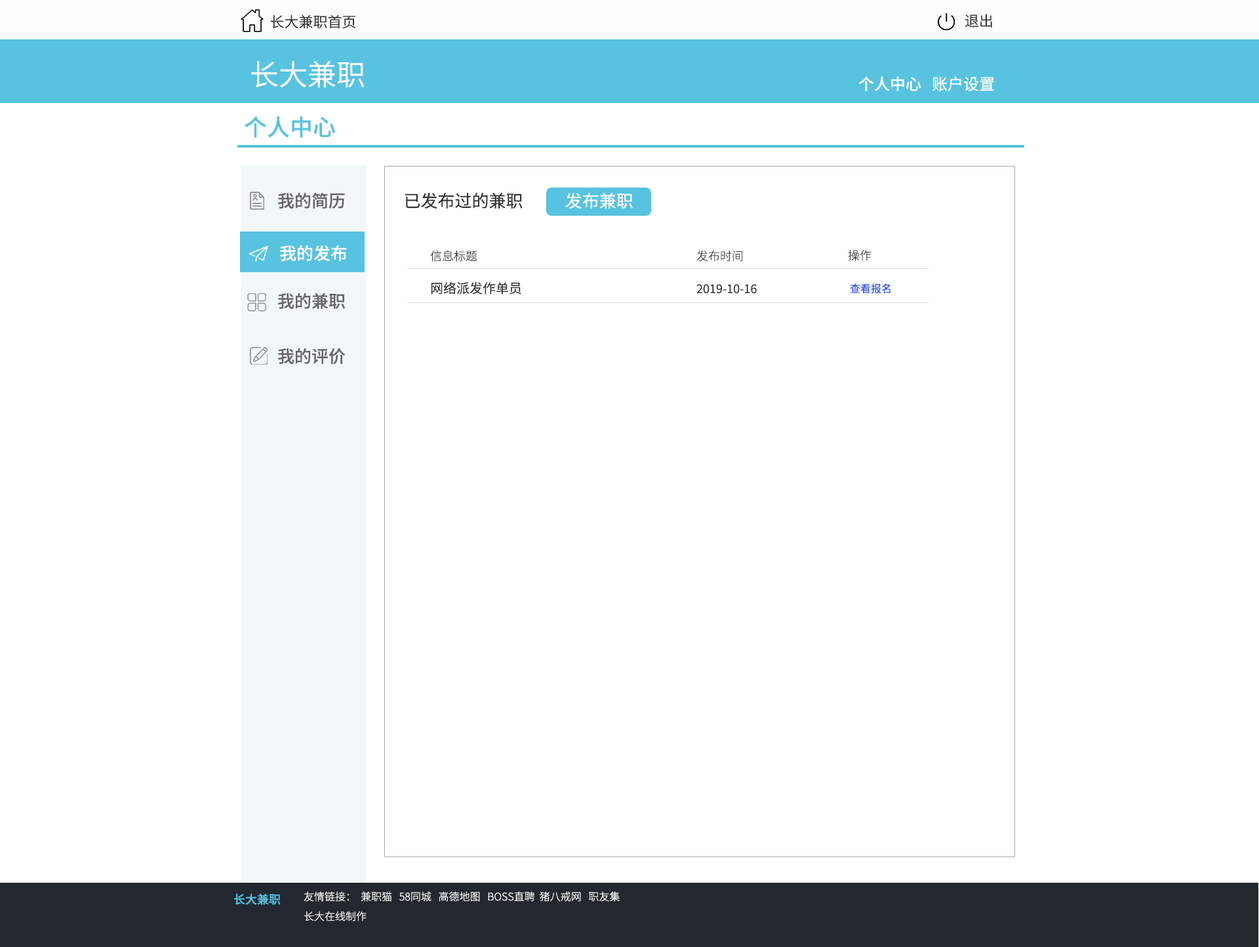
<style>
.page{position:relative;width:1259px;height:947px;background:#ffffff}
.page>*{position:absolute;margin:0}
.t1{font:14.4px "SourceHanSansCN-Normal";color:#333333}
.t2{font:28.9px "SourceHanSansCN-Normal";color:#ffffff}
.t3{font:15.7px "SourceHanSansCN-Medium";color:#ffffff}
.t4{font:15.7px "SourceHanSansCN-Regular";color:#ffffff}
.t5{font:23px "SourceHanSansCN-Medium";color:#57c3e0}
.t6{font:17.1px "SourceHanSansCN-Medium";color:#666666}
.t7{font:17.1px "SourceHanSansCN-Regular";color:#333333}
.t8{font:17.1px "SourceHanSansCN-Regular";color:#ffffff}
.t9{font:17.1px "SourceHanSansCN-Medium";color:#ffffff}
.t10{font:11.8px "SourceHanSansCN-Light";color:#333333}
.t11{font:13.1px "SourceHanSansCN-Regular";color:#333333}
.t12{font:11.8px "SourceHanSansCN-Regular";color:#333333}
.t13{font:10.5px "SourceHanSansCN-Regular";color:#1a4dfc}
.t14{font:11.8px "SourceHanSansCN-Medium";color:#57c3e0}
.t15{font:10.5px "SourceHanSansCN-Light";color:#ffffff}
</style>
<div class="page">
<p class="t1" style="left:270px;top:15px;width:85px;height:14px">长大兼职首页</p>
<p class="t1" style="left:965px;top:14px;width:27px;height:14px">退出</p>
<p class="t2" style="left:251px;top:61px;width:113px;height:27px">长大兼职</p>
<p class="t3" style="left:858px;top:76px;width:136px;height:15px">个人中心<span class="t4">   账户设置</span></p>
<p class="t5" style="left:245px;top:116px;width:90px;height:22px">个人中心</p>
<p class="t6" style="left:278px;top:192px;width:67px;height:17px">我的简历</p>
<p class="t7" style="left:405px;top:193px;width:118px;height:16px">已发布过的兼职</p>
<p class="t8" style="left:565px;top:193px;width:68px;height:16px">发布兼职</p>
<p class="t9" style="left:280px;top:245px;width:67px;height:17px">我的发布</p>
<p class="t10" style="left:430px;top:250px;width:47px;height:12px">信息标题</p>
<p class="t10" style="left:696px;top:250px;width:47px;height:12px">发布时间</p>
<p class="t10" style="left:848px;top:250px;width:24px;height:11px">操作</p>
<p class="t11" style="left:431px;top:281px;width:90px;height:13px">网络派发作单员</p>
<p class="t6" style="left:278px;top:292px;width:67px;height:18px">我的兼职</p>
<p class="t12" style="left:696px;top:284px;width:61px;height:10px">2019-10-16</p>
<p class="t13" style="left:850px;top:283px;width:41px;height:11px">查看报名</p>
<p class="t6" style="left:278px;top:348px;width:68px;height:17px">我的评价</p>
<p class="t14" style="left:234px;top:893px;width:47px;height:12px">长大兼职</p>
<p class="t15" style="left:304px;top:891px;width:316px;height:11px">友情链接：  兼职猫   58同城   高德地图   BOSS直聘  猪八戒网   职友集</p>
<p class="t15" style="left:304px;top:911px;width:63px;height:10px">长大在线制作</p>
</div>
